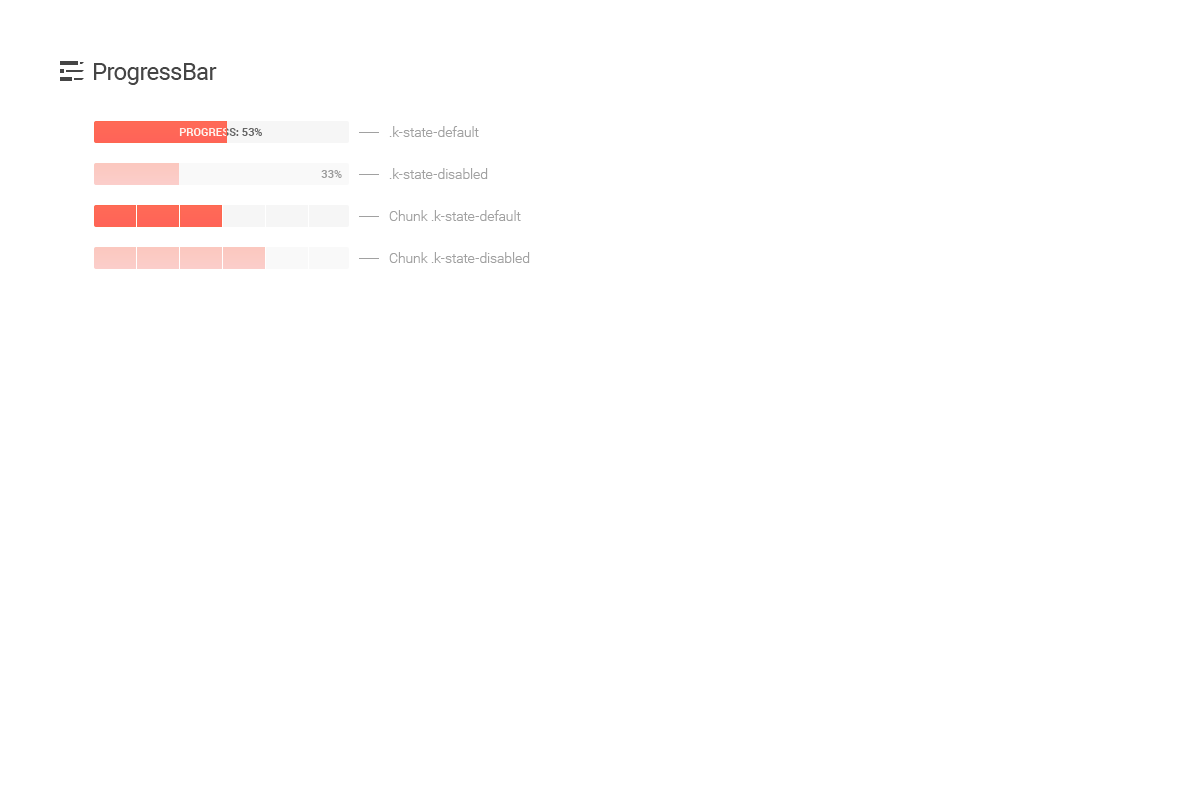
<style>
.page{position:relative;width:1200px;height:800px;background:#ffffff}
.page>*{position:absolute;margin:0}
.t1{font:24px "Roboto-Regular";letter-spacing:-0.025em;color:#454545}
.t2{font:14px/42px "Roboto-Light";color:#a1a1a1}
.t3{font:11px "Roboto-Bold";text-transform:uppercase}
.t4{font:11px "Roboto-Bold";color:#9b9b9b;text-transform:uppercase}
</style>
<div class="page">
<p class="t1" style="left:94px;top:63px;width:123px;height:22px">ProgressBar</p>
<p class="t2" style="left:389px;top:126px;width:141px;height:137px">.k-state-default<br>.k-state-disabled<br>Chunk .k-state-default<br>Chunk .k-state-disabled</p>
<p class="t3" style="left:180px;top:128px;width:82px;height:8px">Progress: 53%</p>
<p class="t4" style="left:321px;top:170px;width:21px;height:8px">33%</p>
<p class="t4" style="left:321px;top:170px;width:21px;height:8px">33%</p>
</div>
